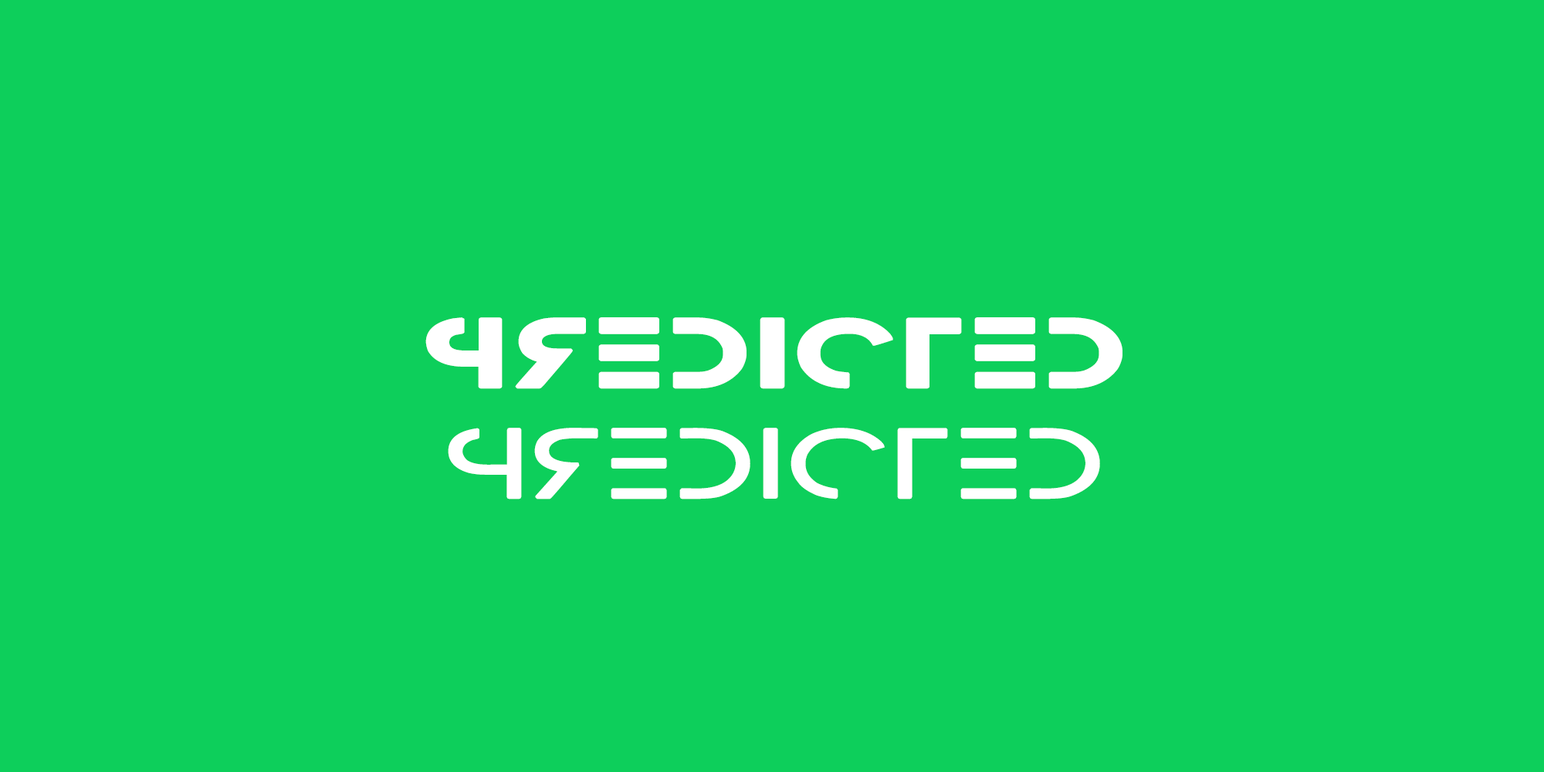
<style>
.page{position:relative;width:1544px;height:772px;background:#0dcf5b}
.page>*{position:absolute;margin:0}
.t1{font:96.5px "Razed-Bold";letter-spacing:0.025em;color:#ffffff;font-weight:bold;scale:1.5 1}
.t2{font:96.5px "RazedLight";letter-spacing:0.025em;color:#ffffff;font-weight:bold;scale:1.5 1}
</style>
<div class="page">
<p class="t1" style="left:425px;top:317px;width:698px;height:72px">PREdIctEd</p>
<p class="t2" style="left:448px;top:428px;width:652px;height:72px">PREdIctEd</p>
</div>
